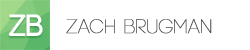
<style>
.page{position:relative;width:250px;height:50px;background:#ffffff}
.page>*{position:absolute;margin:0}
.t1{font:31.2px "Code-Bold";color:#ffffff}
.t2{font:20px "Code-Light";color:#444444;font-weight:bold}
</style>
<div class="page">
<p class="t1" style="left:8px;top:14px;width:35px;height:22px">zb</p>
<p class="t2" style="left:66px;top:19px;width:146px;height:15px">Zach Brugman</p>
</div>
